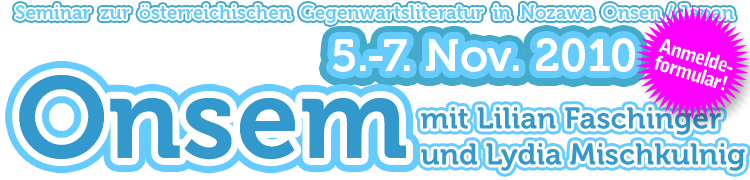
<style>
.page{position:relative;width:750px;height:180px;background:#ffffff}
.page>*{position:absolute;margin:0}
.t1{font:19px "Museo-700";color:#66ccff}
.t2{font:45px "Museo-700";color:#ffffff}
.t3{font:20px/18px "BellGothicStd-Black";letter-spacing:-0.05em;color:#ffffff}
.t4{font:115px "Museo-700";color:#3399cc}
.t5{font:30px "Museo-700";color:#3399cc}
</style>
<div class="page">
<p class="t1" style="left:15px;top:5px;width:719px;height:18px">Seminar zur österreichischen Gegenwartsliteratur in Nozawa Onsen / Japan</p>
<p class="t1" style="left:15px;top:5px;width:719px;height:18px">Seminar zur österreichischen Gegenwartsliteratur in Nozawa Onsen / Japan</p>
<p class="t2" style="left:332px;top:39px;width:303px;height:34px">5.-7. Nov. 2010</p>
<p class="t2" style="left:332px;top:38px;width:303px;height:34px">5.-7. Nov. 2010</p>
<p class="t3" style="left:654px;top:38px;width:79px;height:53px;text-align:center;rotate:17deg">Anmelde-<br>formular!</p>
<p class="t4" style="left:19px;top:75px;width:387px;height:85px">Onsem</p>
<p class="t4" style="left:19px;top:75px;width:387px;height:85px">Onsem</p>
<p class="t5" style="left:421px;top:107px;width:324px;height:64px">mit Lilian Faschinger<br>und Lydia Mischkulnig</p>
<p class="t5" style="left:421px;top:107px;width:324px;height:64px">mit Lilian Faschinger<br>und Lydia Mischkulnig</p>
</div>
